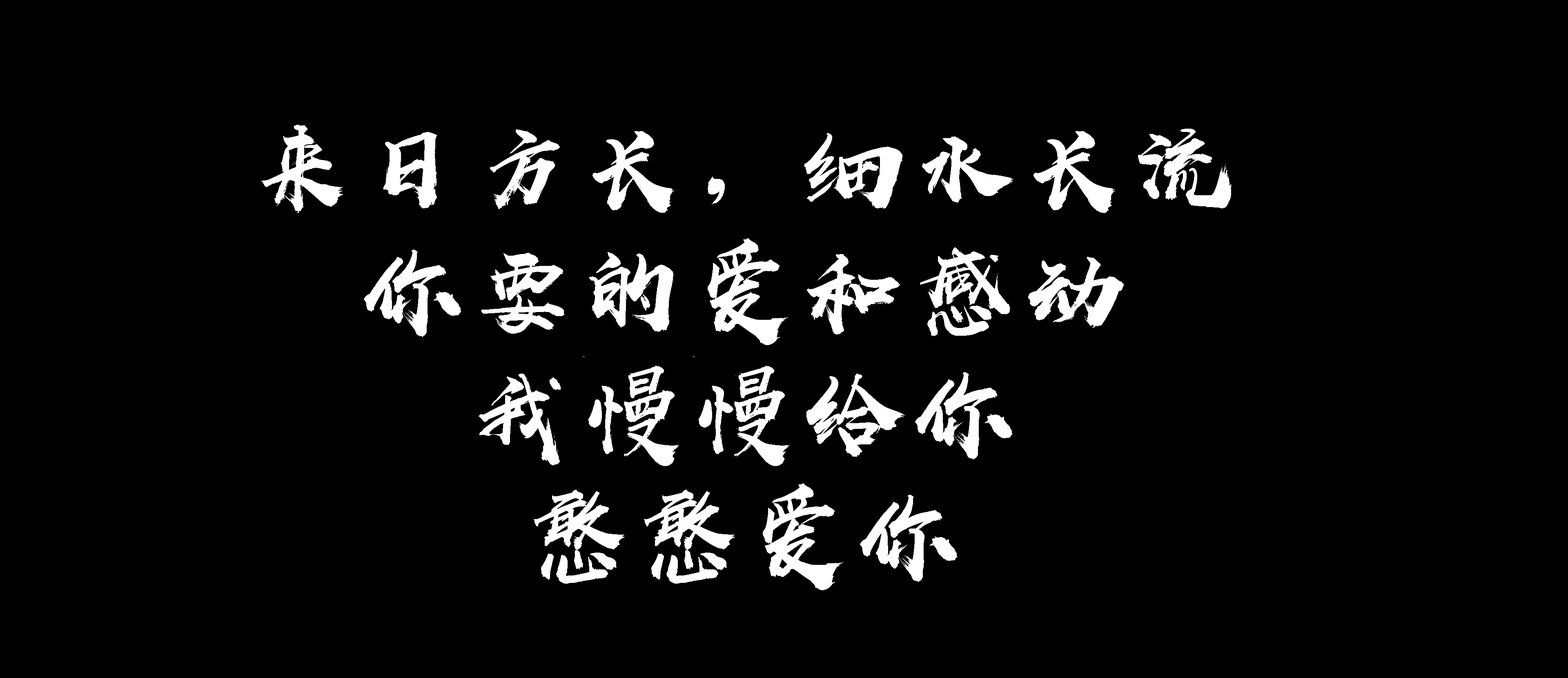
<style>
.page{position:relative;width:1568px;height:678px;background:#000000}
.page>*{position:absolute;margin:0}
.t1{font:102.1px "HYShangWeiShouShuW-Regular";letter-spacing:0.08em;color:#ffffff}
</style>
<div class="page">
<p class="t1" style="left:262px;top:125px;width:970px;height:465px;text-align:center">来日方长，细水长流<br>你要的爱和感动<br>我慢慢给你<br>憨憨爱你</p>
</div>
